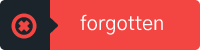
<style>
.page{position:relative;width:200px;height:50px;background:#f34541}
.page>*{position:absolute;margin:0}
.t1{font:20px "GothicA1-Regular";color:#ffffff}
</style>
<div class="page">
<p class="t1" style="left:80px;top:14px;width:83px;height:21px">forgotten</p>
</div>
